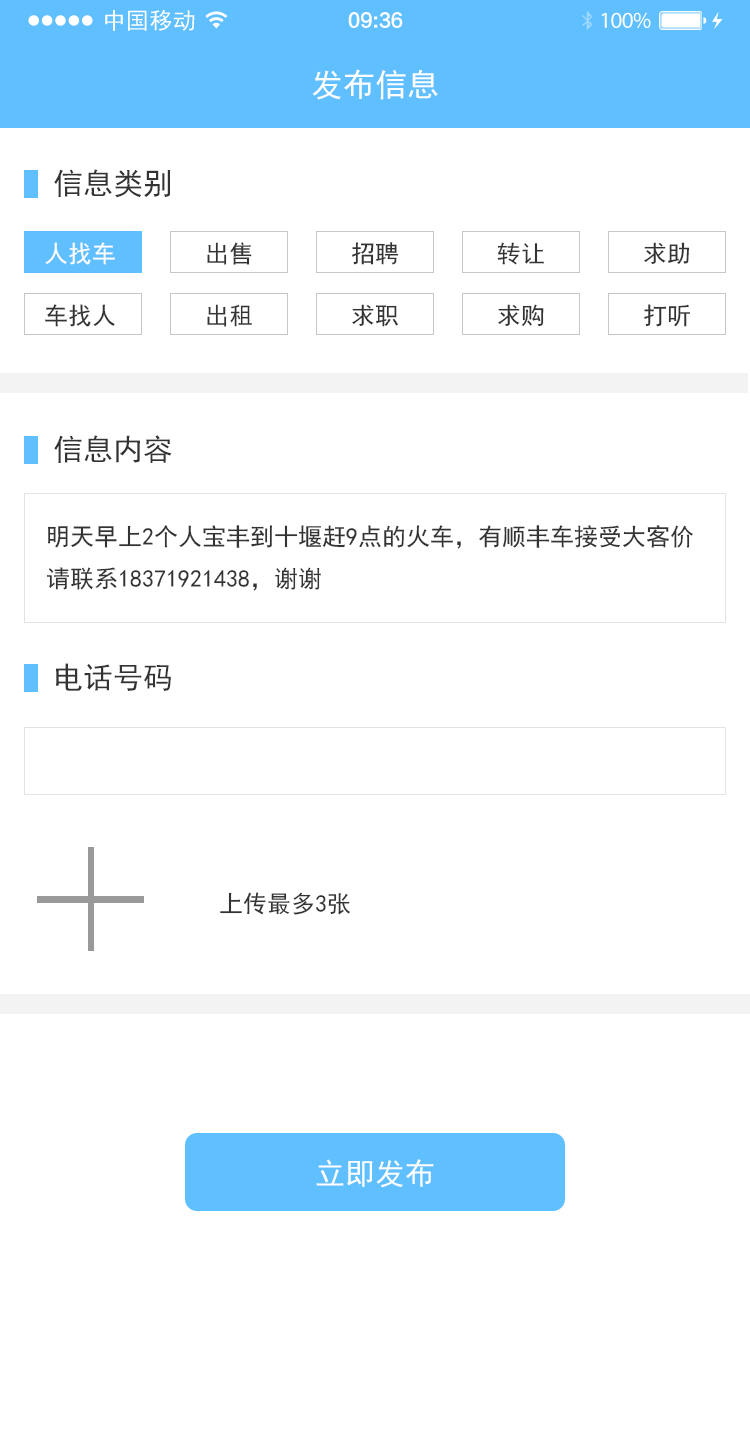
<style>
.page{position:relative;width:750px;height:1448px;background:#ffffff}
.page>*{position:absolute;margin:0}
.t1{font:22.8px "SimHei";letter-spacing:0.02em;color:#ffffff}
.t2{font:19px "FZLTCHJW--GB1-0";letter-spacing:-0.02em;color:#ffffff}
.t3{font:22.8px "MyriadPro-Regular";letter-spacing:-0.02em;color:#ffffff}
.t4{font:32px "SimHei";color:#ffffff}
.t5{font:30px "SimHei";color:#333333}
.t6{font:24px "SimHei";color:#fffefe}
.t7{font:24px "SimHei";color:#333333}
.t8{font:30px "SimHei";color:#ffffff}
</style>
<div class="page">
<p class="t1" style="left:105px;top:10px;width:90px;height:21px">中国移动</p>
<p class="t2" style="left:348px;top:12px;width:55px;height:16px">09:36</p>
<p class="t3" style="left:601px;top:12px;width:50px;height:16px">100%</p>
<p class="t4" style="left:312px;top:69px;width:126px;height:31px">发布信息</p>
<p class="t5" style="left:54px;top:169px;width:117px;height:29px">信息类别</p>
<p class="t6" style="left:45px;top:242px;width:70px;height:23px">人找车</p>
<p class="t7" style="left:207px;top:242px;width:45px;height:23px">出售</p>
<p class="t7" style="left:352px;top:242px;width:47px;height:23px">招聘</p>
<p class="t7" style="left:497px;top:242px;width:47px;height:23px">转让</p>
<p class="t7" style="left:644px;top:242px;width:46px;height:22px">求助</p>
<p class="t7" style="left:45px;top:304px;width:70px;height:23px">车找人</p>
<p class="t7" style="left:207px;top:304px;width:45px;height:23px">出租</p>
<p class="t7" style="left:352px;top:304px;width:46px;height:23px">求职</p>
<p class="t7" style="left:498px;top:304px;width:46px;height:23px">求购</p>
<p class="t7" style="left:644px;top:304px;width:47px;height:23px">打听</p>
<p class="t5" style="left:54px;top:435px;width:118px;height:28px">信息内容</p>
<p class="t7" style="left:46px;top:525px;width:647px;height:66px">明天早上2个人宝丰到十堰赶9点的火车，有顺丰车接受大客价请联系18371921438，谢谢</p>
<p class="t5" style="left:56px;top:663px;width:115px;height:28px">电话号码</p>
<p class="t7" style="left:220px;top:892px;width:130px;height:23px">上传最多3张</p>
<p class="t8" style="left:316px;top:1159px;width:118px;height:29px">立即发布</p>
</div>
